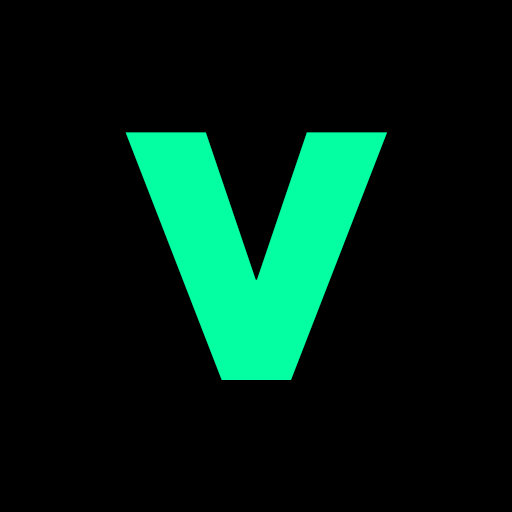
<style>
.page{position:relative;width:512px;height:512px;background:#000000}
.page>*{position:absolute;margin:0}
.t1{font:350px "WantedSans-ExtraBlack";color:#04ffa3}
</style>
<div class="page">
<p class="t1" style="left:125px;top:132px;width:262px;height:248px">V</p>
</div>
